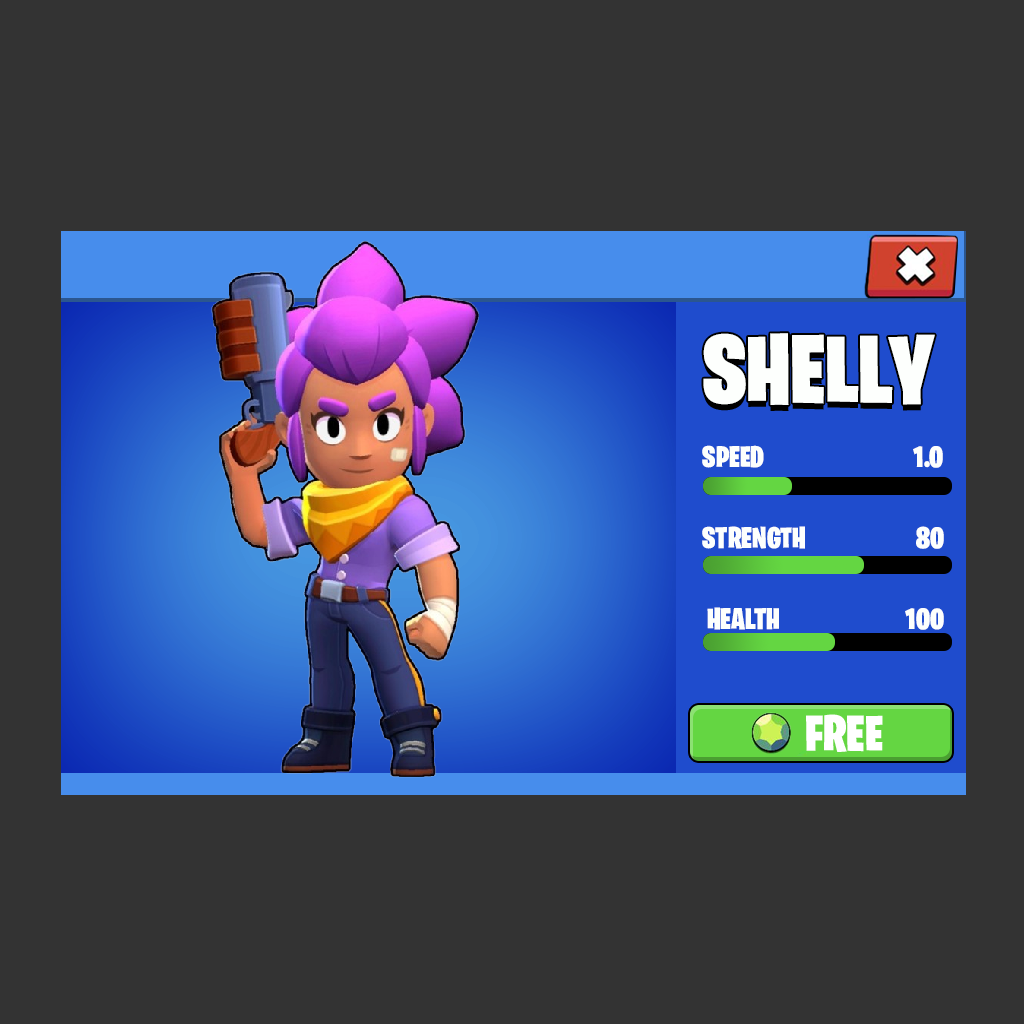
<style>
.page{position:relative;width:1024px;height:1024px;background:#333333}
.page>*{position:absolute;margin:0}
.t1{font:97.7px "BurbankBigCondensed-Black";color:#fdfffd}
.t2{font:30px "BurbankBigCondensed-Black";color:#fdfffd}
</style>
<div class="page">
<p class="t1" style="left:703px;top:333px;width:232px;height:72px">SHELLY</p>
<p class="t2" style="left:702px;top:445px;width:62px;height:23px">SPEED</p>
<p class="t2" style="left:913px;top:446px;width:30px;height:22px">1.0</p>
<p class="t2" style="left:702px;top:526px;width:103px;height:23px">STRENGTH</p>
<p class="t2" style="left:916px;top:526px;width:28px;height:23px">80</p>
<p class="t2" style="left:707px;top:607px;width:72px;height:23px">HEALTH</p>
<p class="t2" style="left:905px;top:608px;width:39px;height:22px">100</p>
</div>
